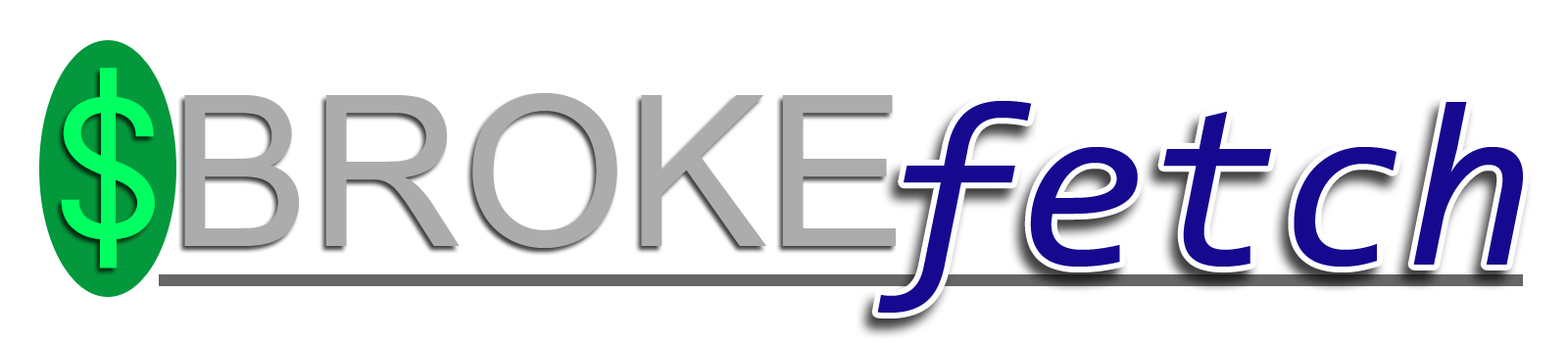
<style>
.page{position:relative;width:1568px;height:343px;background:#ffffff}
.page>*{position:absolute;margin:0}
.t1{font:210.7px "Adwaita-Mono";color:#01ff61}
.t2{font:210.7px "ArialMT";color:#acacac}
.t3{font:235.2px "Consolas-Italic";color:#160990}
</style>
<div class="page">
<p class="t1" style="left:61px;top:68px;width:94px;height:201px">$</p>
<p class="t2" style="left:184px;top:93px;width:712px;height:155px">BROKE</p>
<p class="t3" style="left:877px;top:101px;width:646px;height:212px">fetch</p>
</div>
